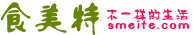
<style>
.page{position:relative;width:193px;height:35px;background:#ffffff}
.page>*{position:absolute;margin:0}
.t1{font:35px "FZLXTJW--GB1-0";color:#688400}
.t2{font:14px "FZPHTJW--GB1-0";color:#f20f56}
.t3{font:14px "FZSEJW--GB1-0";letter-spacing:0.1em;color:#f20f56}
</style>
<div class="page">
<p class="t1" style="left:1px;top:2px;width:98px;height:33px">食美特</p>
<p class="t2" style="left:106px;top:9px;width:82px;height:12px">不一样的生活</p>
<p class="t3" style="left:108px;top:20px;width:81px;height:10px">smeite.com</p>
</div>
